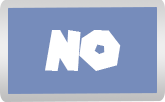
<style>
.page{position:relative;width:165px;height:102px;background:#768cbb}
.page>*{position:absolute;margin:0}
.t1{font:54.8px "SuperMarioGalaxy";color:#ffffff}
</style>
<div class="page">
<p class="t1" style="left:45px;top:30px;width:76px;height:41px">No</p>
</div>
